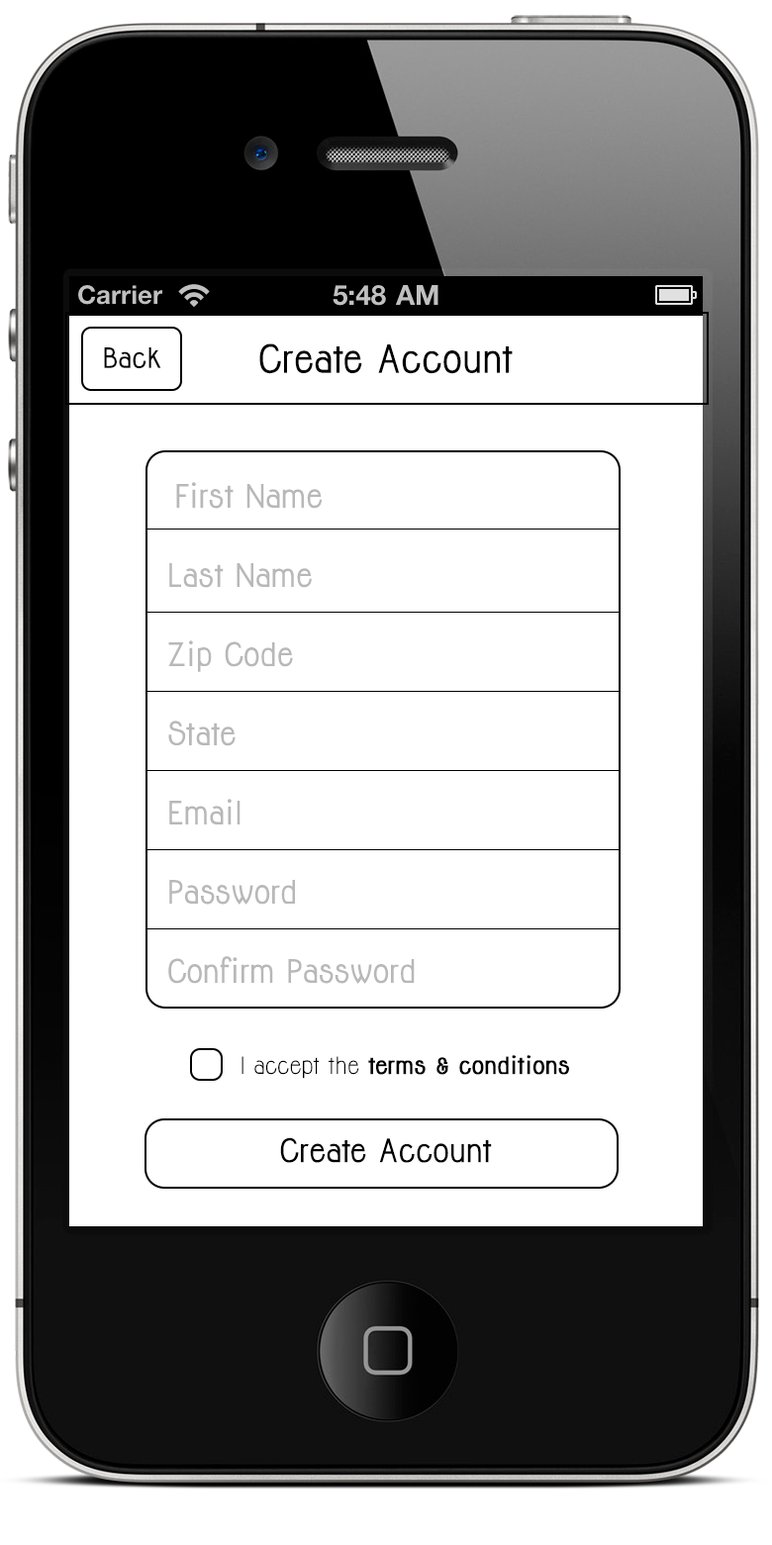
<style>
.page{position:relative;width:772px;height:1545px;background:#ffffff}
.page>*{position:absolute;margin:0}
.t1{font:25.7px "Jolly-Bold";color:#000000}
.t2{font:35.6px "Jolly-Bold";color:#000000}
.t3{font:29.7px "Jolly-Bold";color:#b8b8b8}
.t4{font:21.8px "Jolly-Bold";color:#000000;font-weight:bold}
.t5{font:21.8px "Jolly";color:#000000}
.t6{font:29.7px "Jolly-Bold";color:#000000}
</style>
<div class="page">
<p class="t1" style="left:104px;top:347px;width:57px;height:21px">Back</p>
<p class="t2" style="left:259px;top:343px;width:254px;height:31px">Create Account</p>
<p class="t3" style="left:176px;top:482px;width:147px;height:27px">First Name</p>
<p class="t3" style="left:169px;top:563px;width:143px;height:25px">Last Name</p>
<p class="t3" style="left:168px;top:640px;width:125px;height:32px">Zip Code</p>
<p class="t3" style="left:168px;top:720px;width:68px;height:26px">State</p>
<p class="t3" style="left:169px;top:799px;width:71px;height:25px">Email</p>
<p class="t3" style="left:169px;top:880px;width:126px;height:25px">Password</p>
<p class="t3" style="left:168px;top:956px;width:247px;height:28px">Confirm Password</p>
<p class="t4" style="left:241px;top:1055px;width:328px;height:24px"><span class="t5">I accept the </span>terms &amp; conditions</p>
<p class="t6" style="left:280px;top:1137px;width:212px;height:26px">Create Account</p>
</div>
